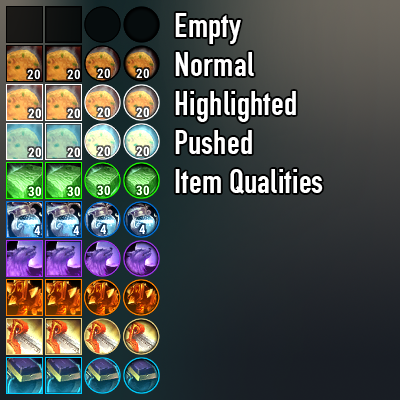
<style>
.page{position:relative;width:400px;height:400px}
.page>*{position:absolute;margin:0}
.t1{font:36px/39px "TGL0-1451Engschrift";letter-spacing:0.005em;color:#ffffff}
</style>
<div class="page">
<p class="t1" style="left:175px;top:13px;width:148px;height:181px">Empty<br>Normal<br>Highlighted<br>Pushed<br>Item Qualities</p>
</div>
